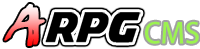
<style>
.page{position:relative;width:200px;height:49px;background:#ffffff}
.page>*{position:absolute;margin:0}
.t1{font:47.4px "IWantMyTTR!Expanded"}
.t2{font:28px "AdobeHeitiStd-Regular";color:#9cf24f}
</style>
<div class="page">
<p class="t1" style="left:4px;top:4px;width:41px;height:42px">A</p>
<p class="t2" style="left:145px;top:21px;width:54px;height:23px">CMS</p>
</div>
